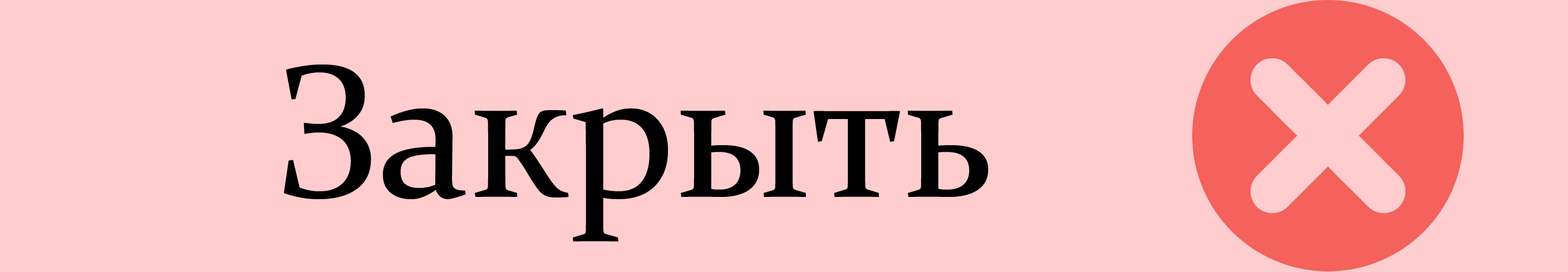
<style>
.page{position:relative;width:1568px;height:272px;background:#ffcdcd}
.page>*{position:absolute;margin:0}
.t1{font:189px "Constantia";color:#000000}
</style>
<div class="page">
<p class="t1" style="left:284px;top:64px;width:705px;height:178px">Закрыть</p>
</div>
